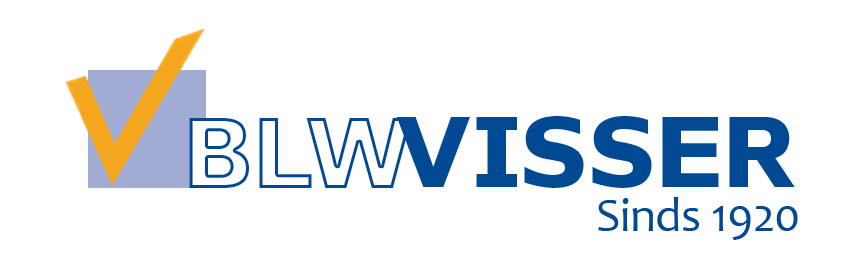
<style>
.page{position:relative;width:851px;height:266px;background:#ffffff}
.page>*{position:absolute;margin:0}
.t1{font:100px "Nauman-ExtraBold";letter-spacing:-0.01em;color:#ffffff}
.t2{font:100px "Nauman-ExtraBold";letter-spacing:-0.01em;color:#014a93}
.t3{font:48px "Candara";letter-spacing:-0.01em;color:#014a93}
</style>
<div class="page">
<p class="t1" style="left:189px;top:118px;width:223px;height:70px">BLW</p>
<p class="t2" style="left:396px;top:116px;width:399px;height:72px">VISSER</p>
<p class="t3" style="left:598px;top:197px;width:200px;height:43px">Sinds 1920</p>
</div>
